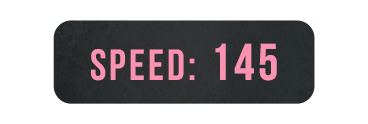
<style>
.page{position:relative;width:368px;height:124px;background:#ffffff}
.page>*{position:absolute;margin:0}
.t1{font:43.7px "UTM-Bebas";letter-spacing:0.06em;color:#fa92b2}
.t2{font:51.8px "UTM-Bebas";letter-spacing:0.06em;color:#fa92b2}
</style>
<div class="page">
<p class="t1" style="left:91px;top:43px;width:186px;height:38px">Speed: <span class="t2">145</span></p>
</div>
